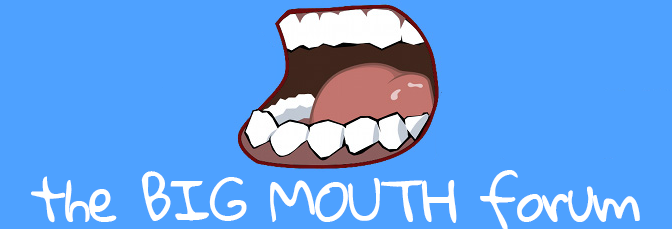
<style>
.page{position:relative;width:672px;height:229px;background:#4ea1ff}
.page>*{position:absolute;margin:0}
.t1{font:58.2px "GloriaHallelujah";letter-spacing:-0.04em;color:#ffffff;scale:0.96 1}
</style>
<div class="page">
<p class="t1" style="left:31px;top:170px;width:609px;height:59px">the BIG MOUTH forum</p>
</div>
